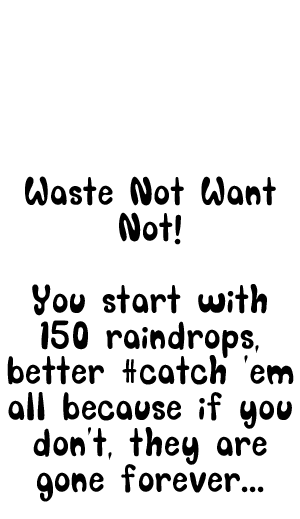
<style>
.page{position:relative;width:300px;height:519px;background:#ffffff}
.page>*{position:absolute;margin:0}
.t1{font:29.9px "SORRY_SORRY";letter-spacing:0.03em;color:#000000}
</style>
<div class="page">
<p class="t1" style="left:7px;top:176px;width:287px;height:326px;text-align:center">Waste Not Want Not!<br><br>You start with 150 raindrops, better #catch 'em all because if you don't, they are gone forever...</p>
</div>
